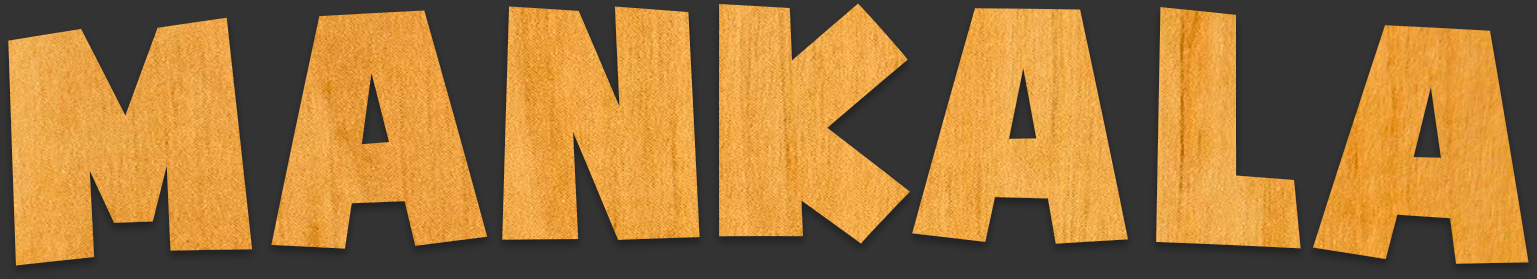
<style>
.page{position:relative;width:1537px;height:279px;background:#333333}
.page>*{position:absolute;margin:0}
.t1{font:375px "SoupofJustice";color:#eda543}
</style>
<div class="page">
<p class="t1" style="left:8px;top:3px;width:1521px;height:263px">MANKALA</p>
</div>
